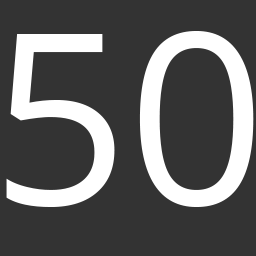
<style>
.page{position:relative;width:256px;height:256px;background:#333333}
.page>*{position:absolute;margin:0}
.t1{font:240px "OpenSans";color:#ffffff}
</style>
<div class="page">
<p class="t1" style="left:6px;top:31px;width:248px;height:176px">50</p>
</div>
